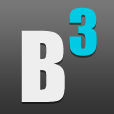
<style>
.page{position:relative;width:114px;height:114px}
.page>*{position:absolute;margin:0}
.t1{font:90px "Impact";color:#eeeeee;text-transform:uppercase}
.t2{font:100px "Impact";color:#01cae4;text-transform:uppercase}
</style>
<div class="page">
<p class="t1" style="left:21px;top:7px;width:76px;height:95px">B<span class="t2">3</span></p>
</div>
